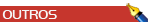
<style>
.page{position:relative;width:148px;height:22px;background:#c6362d}
.page>*{position:absolute;margin:0}
.t1{font:12px "HancockParkLightLaser";color:#f6f6f6}
</style>
<div class="page">
<p class="t1" style="left:2px;top:10px;width:55px;height:9px">OUTROS</p>
</div>
